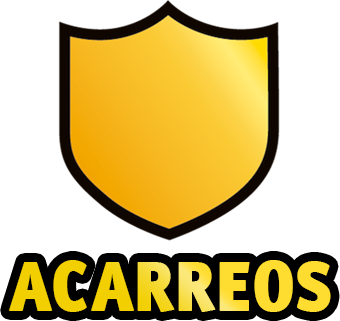
<style>
.page{position:relative;width:340px;height:321px;background:#ffffff}
.page>*{position:absolute;margin:0}
.t1{font:72px "OfficinaSanITC-Black";scale:0.96 1}
</style>
<div class="page">
<p class="t1" style="left:9px;top:260px;width:322px;height:52px">ACARREOS</p>
</div>
